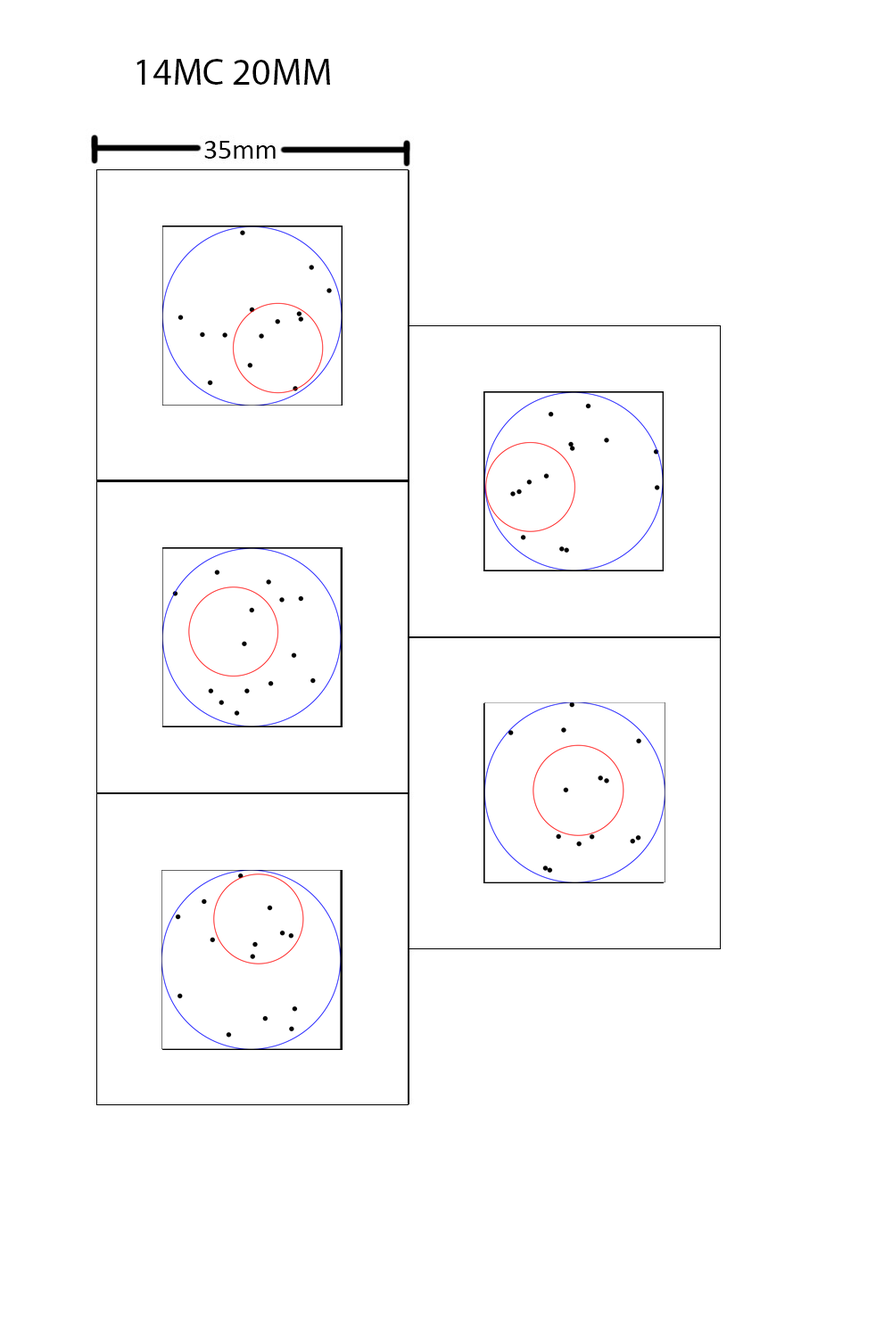
<style>
.page{position:relative;width:892px;height:1337px;background:#ffffff}
.page>*{position:absolute;margin:0}
.t1{font:37.7px "MyriadPro-Regular";color:#000000}
</style>
<div class="page">
<p class="t1" style="left:136px;top:59px;width:194px;height:26px">14MC 20MM</p>
</div>
